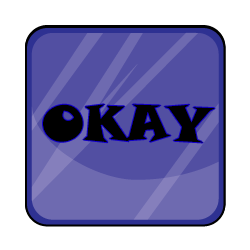
<style>
.page{position:relative;width:250px;height:250px;background:#ffffff}
.page>*{position:absolute;margin:0}
.t1{font:50.1px "SnapITC-Regular";color:#000000}
</style>
<div class="page">
<p class="t1" style="left:43px;top:104px;width:172px;height:39px">OKAY</p>
</div>
